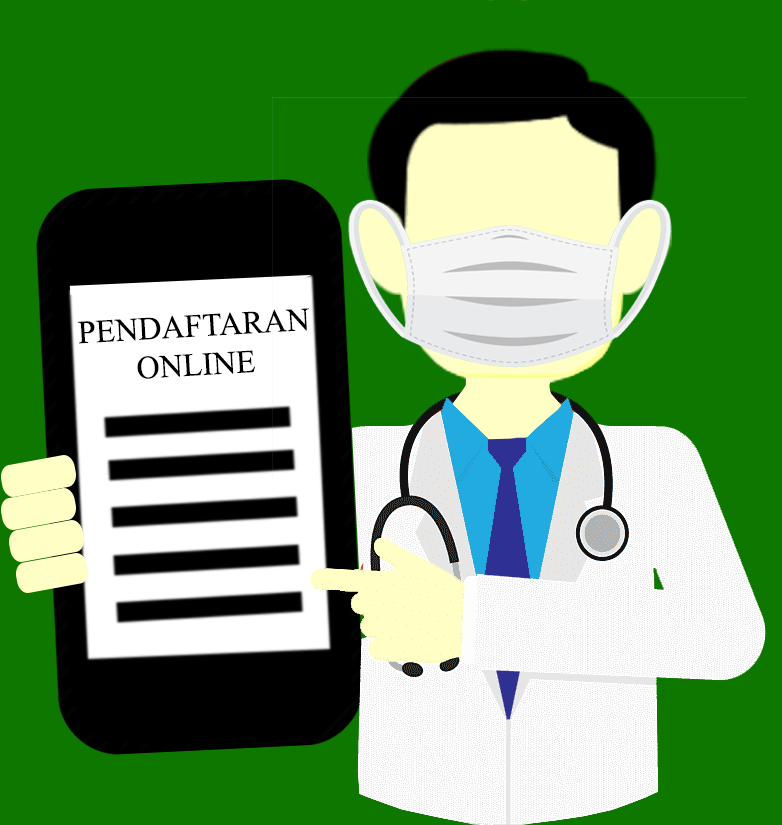
<style>
.page{position:relative;width:782px;height:825px;background:#0e7700}
.page>*{position:absolute;margin:0}
.t1{font:32.3px "TimesNewRomanPSMT";color:#000000}
</style>
<div class="page">
<p class="t1" style="left:77px;top:308px;width:232px;height:71px;text-align:center;rotate:-3deg">PENDAFTARAN<br>ONLINE</p>
</div>
